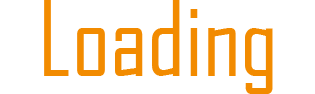
<style>
.page{position:relative;width:315px;height:94px;background:#ffffff}
.page>*{position:absolute;margin:0}
.t1{font:100px "AgencyFB-Reg";color:#f28b00}
</style>
<div class="page">
<p class="t1" style="left:44px;top:0px;width:229px;height:94px">Loading</p>
</div>
